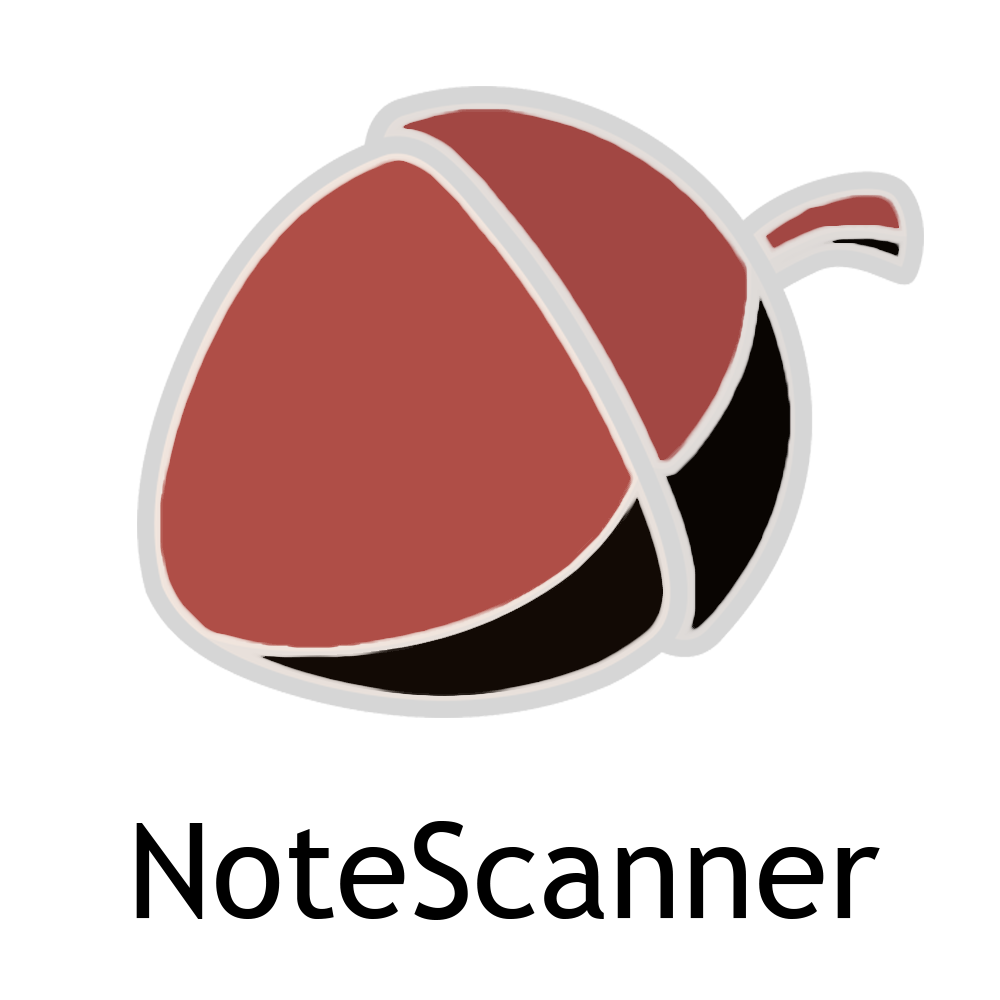
<style>
.page{position:relative;width:1000px;height:1000px;background:#ffffff}
.page>*{position:absolute;margin:0}
.t1{font:133.3px "TrebuchetMS";color:#000000}
</style>
<div class="page">
<p class="t1" style="left:136px;top:821px;width:744px;height:99px">NoteScanner</p>
</div>
